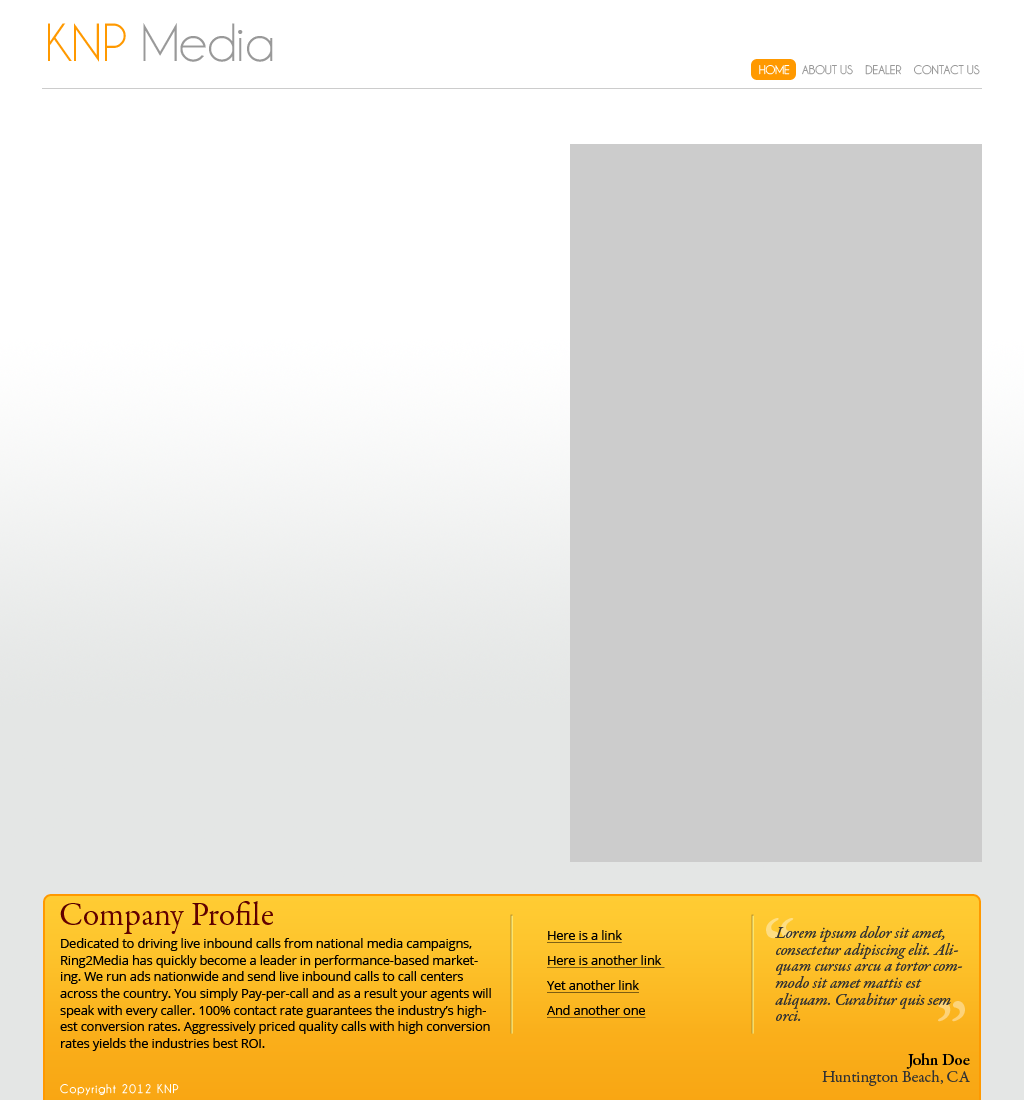
<style>
.page{position:relative;width:1024px;height:1100px;background:#cccccc}
.page>*{position:absolute;margin:0}
.t1{font:54.2px "Champagne&Limousines";color:#999999}
.t2{font:54.2px "Champagne&Limousines";color:#ff9900}
.t3{font:12.5px "Champagne&Limousines";color:#999999}
.t4{font:12.5px "Champagne&Limousines";color:#ffffff}
.t5{font:33.3px "GaramondPremrPro";color:#620000}
.t6{font:95.8px/16.7px "GaramondPremrPro";color:#fdd37a}
.t7{font:16.7px/16.7px "GaramondPremrPro-It";color:#333333}
.t8{font:12.5px/16.7px "OpenSans";color:#000000}
.t9{font:12.5px/25px "OpenSans";color:#000000;text-decoration:underline}
.t10{font:16.7px/16.7px "GaramondPremrPro";color:#333333}
.t11{font:16.7px/16.7px "GaramondPremrPro-Smbd";color:#000000}
.t12{font:12.5px "Champagne&Limousines";letter-spacing:0.1em;color:#ffffff}
</style>
<div class="page">
<p class="t1" style="left:48px;top:23px;width:225px;height:39px"><span class="t2">KNP </span>Media</p>
<p class="t3" style="left:759px;top:65px;width:221px;height:10px"><span class="t4">HOME</span>    ABOUT US    DEALER    CONTACT US</p>
<p class="t5" style="left:60px;top:901px;width:213px;height:33px">Company Profile</p>
<p class="t6" style="left:766px;top:918px;width:199px;height:104px">“<br><br><br>            <br><br>         ”</p>
<p class="t7" style="left:775px;top:926px;width:188px;height:95px">Lorem ipsum dolor sit amet, consectetur adipiscing elit. Aliquam cursus arcu a tortor commodo sit amet mattis est aliquam. Curabitur quis sem orci.</p>
<p class="t8" style="left:60px;top:938px;width:431px;height:113px">Dedicated to driving live inbound calls from national media campaigns, Ring2Media has quickly become a leader in performance-based marketing. We run ads nationwide and send live inbound calls to call centers across the country. You simply Pay-per-call and as a result your agents will speak with every caller. 100% contact rate guarantees the industry’s highest conversion rates. Aggressively priced quality calls with high conversion rates yields the industries best ROI.</p>
<p class="t9" style="left:547px;top:930px;width:118px;height:88px">Here is a link<br>Here is another link <br>Yet another link<br>And another one</p>
<p class="t10" style="left:822px;top:1053px;width:148px;height:33px;text-align:right"><span class="t11">John Doe<br></span>Huntington Beach, CA</p>
<p class="t12" style="left:60px;top:1084px;width:119px;height:12px">Copyright 2012 KNP</p>
</div>
